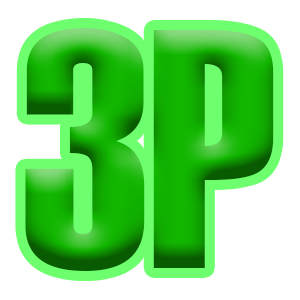
<style>
.page{position:relative;width:300px;height:300px;background:#ffffff}
.page>*{position:absolute;margin:0}
.t1{font:340.3px "Haettenschweiler"}
</style>
<div class="page">
<p class="t1" style="left:25px;top:28px;width:249px;height:243px">3P</p>
</div>
